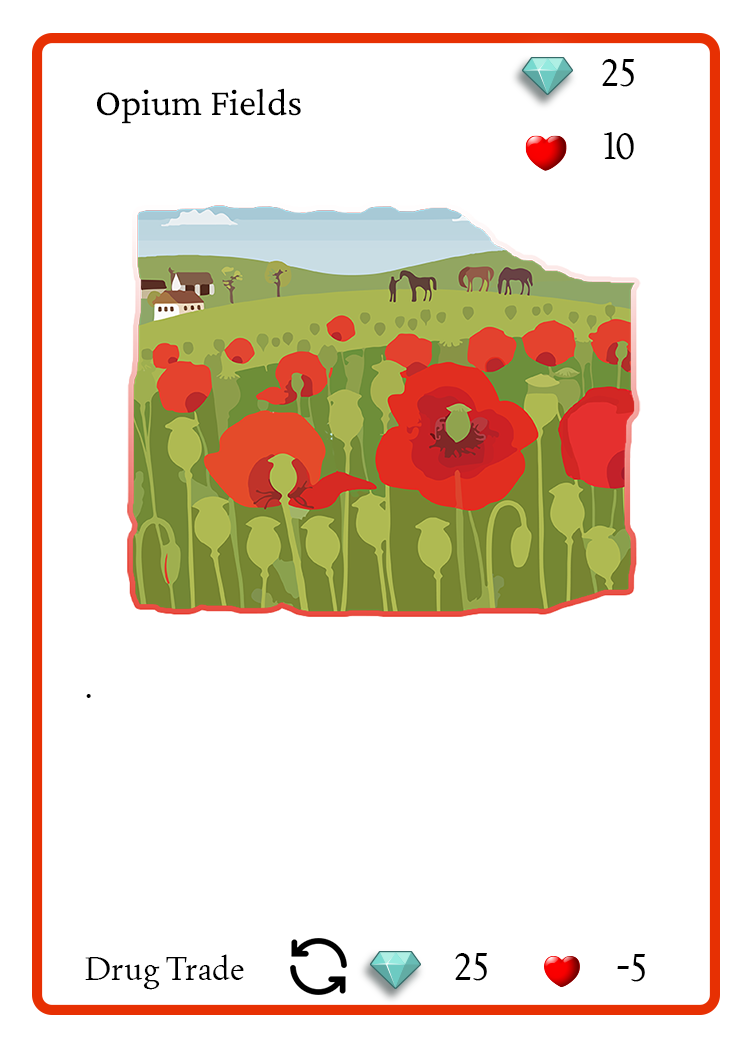
<style>
.page{position:relative;width:750px;height:1050px;background:#ffffff}
.page>*{position:absolute;margin:0}
.t1{font:37.5px "Joan-Regular";color:#000000;text-transform:uppercase}
.t2{font:38.9px "CrimsonPro-Regular";color:#000000}
.t3{font:33.3px "Joan-Regular";color:#000000}
</style>
<div class="page">
<p class="t1" style="left:602px;top:59px;width:32px;height:28px">25</p>
<p class="t2" style="left:97px;top:88px;width:204px;height:36px">Opium Fields</p>
<p class="t1" style="left:604px;top:132px;width:30px;height:28px">10</p>
<p class="t3" style="left:86px;top:694px;width:5px;height:4px">.</p>
<p class="t1" style="left:455px;top:953px;width:32px;height:28px">25</p>
<p class="t3" style="left:85px;top:954px;width:159px;height:36px">Drug Trade</p>
<p class="t1" style="left:617px;top:954px;width:28px;height:28px">-5</p>
</div>
